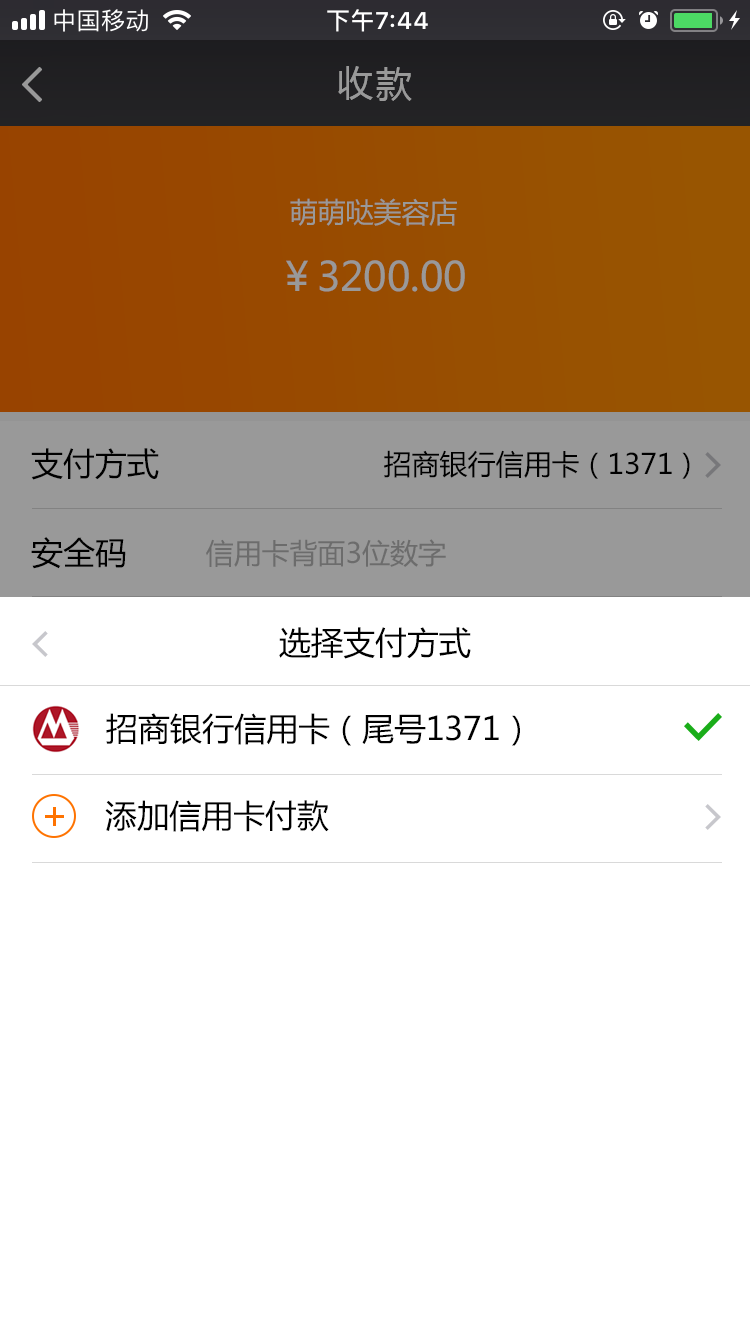
<style>
.page{position:relative;width:750px;height:1334px;background:#ffffff}
.page>*{position:absolute;margin:0}
.t1{font:36px "MicrosoftYaHei";letter-spacing:0.08em;color:#999999}
.t2{font:28px "MicrosoftYaHei";color:#999999}
.t3{font:40px "MicrosoftYaHei";color:#999999}
.t4{font:32px "MicrosoftYaHei";color:#000000}
.t5{font:28px "MicrosoftYaHei";color:#000000}
.t6{font:28px "MicrosoftYaHei";color:#747474}
</style>
<div class="page">
<p class="t1" style="left:338px;top:66px;width:74px;height:35px">收款</p>
<p class="t2" style="left:290px;top:198px;width:167px;height:28px">萌萌哒美容店</p>
<p class="t3" style="left:286px;top:260px;width:179px;height:32px">￥3200.00</p>
<p class="t4" style="left:31px;top:448px;width:128px;height:32px">支付方式</p>
<p class="t5" style="left:384px;top:450px;width:306px;height:29px">招商银行信用卡（1371）</p>
<p class="t4" style="left:31px;top:537px;width:95px;height:32px">安全码</p>
<p class="t6" style="left:206px;top:539px;width:240px;height:28px">信用卡背面3位数字</p>
<p class="t4" style="left:279px;top:627px;width:192px;height:32px">选择支付方式</p>
<p class="t4" style="left:106px;top:713px;width:414px;height:33px">招商银行信用卡（尾号1371）</p>
<p class="t4" style="left:105px;top:800px;width:224px;height:32px">添加信用卡付款</p>
</div>
